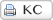
<style>
.page{position:relative;width:53px;height:20px;background:#ffffff}
.page>*{position:absolute;margin:0}
.t1{font:13px "LaoMN";color:#272425}
</style>
<div class="page">
<p class="t1" style="left:23px;top:4px;width:19px;height:11px">KC</p>
</div>
